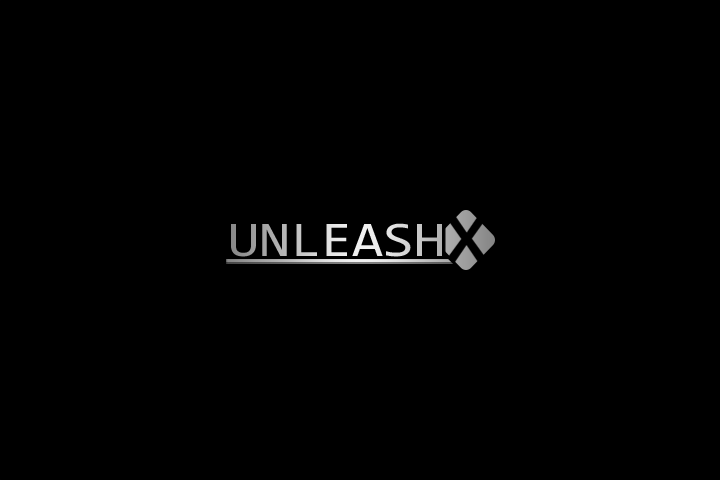
<style>
.page{position:relative;width:720px;height:480px;background:#000000}
.page>*{position:absolute;margin:0}
.t1{font:50px "Consolas";scale:1.12 1}
</style>
<div class="page">
<p class="t1" style="left:231px;top:223px;width:211px;height:34px">UNLEASH</p>
</div>
